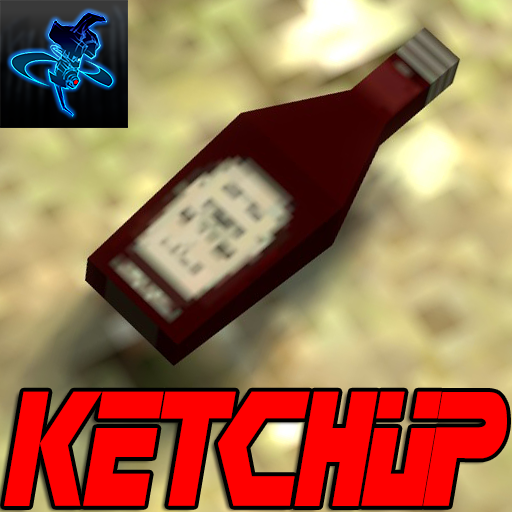
<style>
.page{position:relative;width:512px;height:512px}
.page>*{position:absolute;margin:0}
.t1{font:125.7px "MetalGear";letter-spacing:-0.02em;color:#ff0000;scale:0.77 1}
</style>
<div class="page">
<p class="t1" style="left:4px;top:391px;width:503px;height:115px">ketchup</p>
</div>
